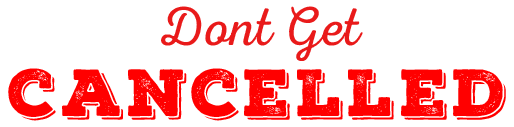
<style>
.page{position:relative;width:514px;height:127px;background:#ffffff}
.page>*{position:absolute;margin:0}
.t1{font:55.2px "NexaRustScriptL-0";color:#e91a1a}
.t2{font:64.5px "NexaRustSlab-BlackShadow01";letter-spacing:0.075em;color:#ff0000}
</style>
<div class="page">
<p class="t1" style="left:161px;top:6px;width:202px;height:55px">Dont Get</p>
<p class="t2" style="left:8px;top:68px;width:498px;height:53px">cancelled</p>
</div>
